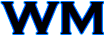
<style>
.page{position:relative;width:104px;height:35px;background:#000000}
.page>*{position:absolute;margin:0}
.t1{font:48.9px "CopperplateGothic-Bold";color:#000000}
</style>
<div class="page">
<p class="t1" style="left:1px;top:2px;width:103px;height:32px">WM</p>
</div>
